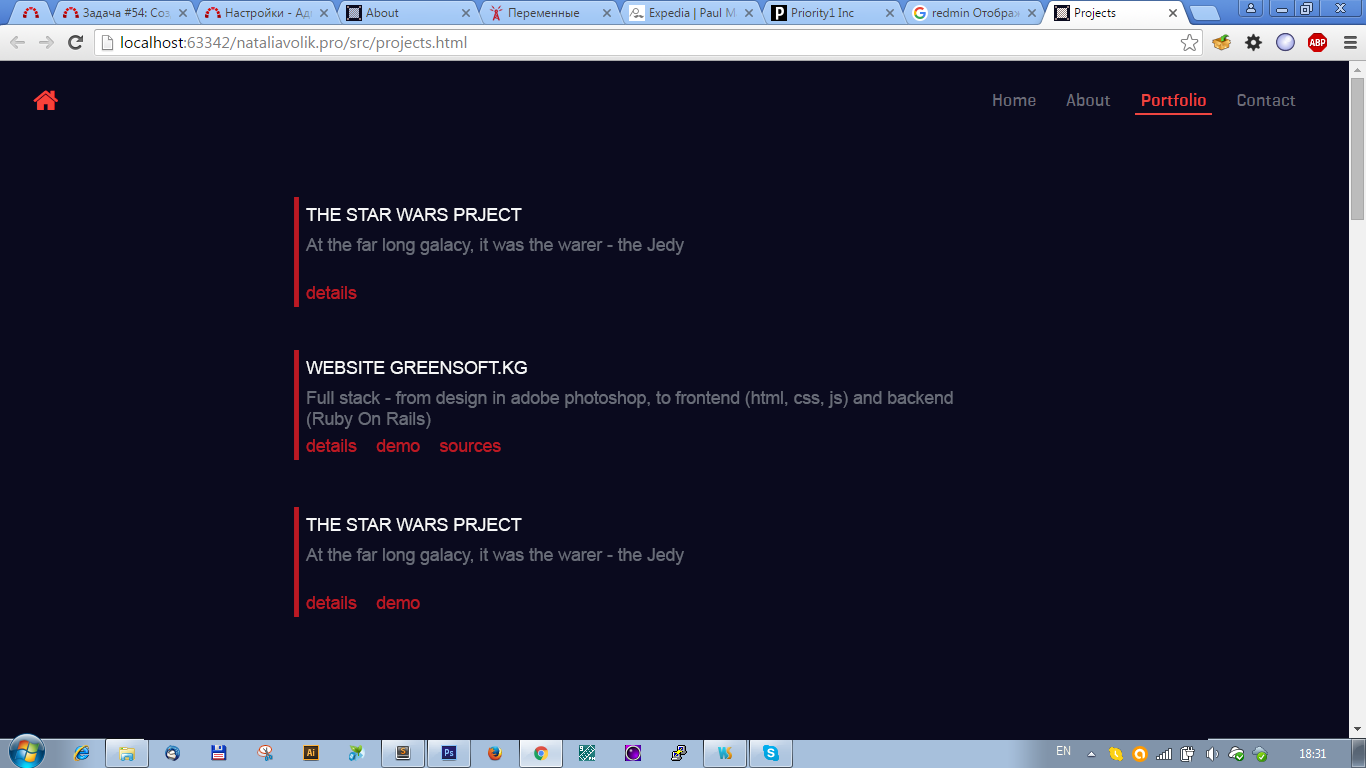
<style>
.page{position:relative;width:1366px;height:768px;background:#0a0a1e}
.page>*{position:absolute;margin:0}
.t1{font:17.6px "ArialMT";color:#f6f7f8}
.t2{font:17.6px "ArialMT";color:#686c78}
.t3{font:17.6px "ArialMT";color:#bc1923}
</style>
<div class="page">
<p class="t1" style="left:306px;top:208px;width:216px;height:13px">THE STAR WARS PRJECT</p>
<p class="t2" style="left:305px;top:238px;width:379px;height:17px">At the far long galacy, it was the warer - the Jedy</p>
<p class="t3" style="left:306px;top:286px;width:51px;height:13px">details</p>
<p class="t1" style="left:306px;top:361px;width:221px;height:13px">WEBSITE GREENSOFT.KG</p>
<p class="t2" style="left:307px;top:391px;width:646px;height:38px">Full stack - from design in adobe photoshop, to frontend (html, css, js) and backend <br>(Ruby On Rails)</p>
<p class="t3" style="left:306px;top:439px;width:195px;height:13px">details    demo    sources</p>
<p class="t1" style="left:306px;top:518px;width:216px;height:13px">THE STAR WARS PRJECT</p>
<p class="t2" style="left:305px;top:548px;width:379px;height:17px">At the far long galacy, it was the warer - the Jedy</p>
<p class="t3" style="left:306px;top:596px;width:114px;height:13px">details    demo</p>
</div>
